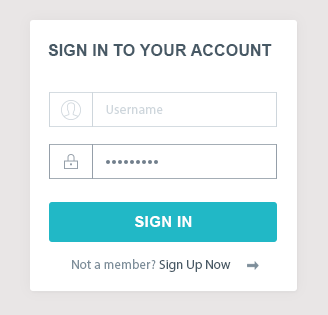
<style>
.page{position:relative;width:328px;height:315px;background:#ffffff}
.page>*{position:absolute;margin:0}
.t1{font:16px "Arial-BoldMT";letter-spacing:0.01em;color:#475965}
.t2{font:13px "ArialMT";letter-spacing:0.025em;color:#ced6dc}
.t3{font:15px "Arial-BoldMT";letter-spacing:0.025em;color:#ffffff}
.t4{font:13px "ArialMT";letter-spacing:0.01em;color:#7d8e9a}
.t5{font:13px "ArialMT";letter-spacing:0.01em;color:#475965}
</style>
<div class="page">
<p class="t1" style="left:48px;top:44px;width:224px;height:12px">SIGN IN TO YOUR ACCOUNT</p>
<p class="t2" style="left:106px;top:105px;width:57px;height:9px">Username</p>
<p class="t3" style="left:135px;top:216px;width:57px;height:11px">SIGN IN</p>
<p class="t4" style="left:72px;top:259px;width:159px;height:13px">Not a member?<span class="t5"> Sign Up Now</span></p>
</div>
